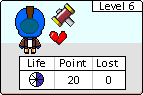
<style>
.page{position:relative;width:143px;height:95px;background:#e8ffff}
.page>*{position:absolute;margin:0}
.t1{font:12px "Calibri";color:#000000}
</style>
<div class="page">
<p class="t1" style="left:100px;top:2px;width:34px;height:8px">Level 6</p>
<p class="t1" style="left:28px;top:59px;width:17px;height:8px">Life</p>
<p class="t1" style="left:60px;top:59px;width:26px;height:8px">Point</p>
<p class="t1" style="left:97px;top:59px;width:21px;height:8px">Lost</p>
<p class="t1" style="left:68px;top:76px;width:11px;height:8px">20</p>
<p class="t1" style="left:106px;top:76px;width:5px;height:8px">0</p>
</div>
